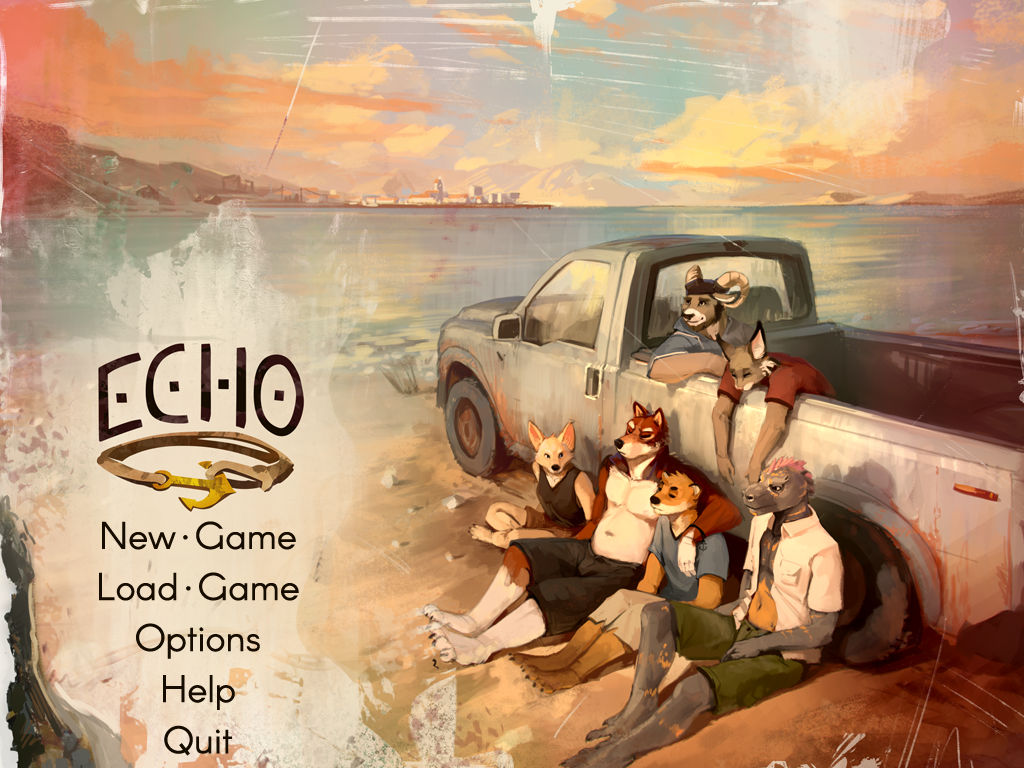
<style>
.page{position:relative;width:1024px;height:768px}
.page>*{position:absolute;margin:0}
.t1{font:38px/54px "Arcon-Regular";color:#160c00}
</style>
<div class="page">
<p class="t1" style="left:99px;top:521px;width:200px;height:235px;text-align:center">New·Game<br>Load·Game<br>Options<br>Help<br>Quit</p>
</div>
